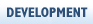
<style>
.page{position:relative;width:93px;height:24px}
.page>*{position:absolute;margin:0}
.t1{font:14px "Humanist521BT-BoldCondensed";color:#2d5078}
</style>
<div class="page">
<p class="t1" style="left:7px;top:7px;width:81px;height:11px">DEVELOPMENT</p>
</div>
